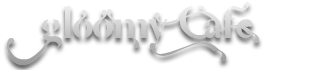
<style>
.page{position:relative;width:333px;height:70px;background:#ffffff}
.page>*{position:absolute;margin:0}
.t1{font:45.8px "CafeLounge19";color:#cccccc}
</style>
<div class="page">
<p class="t1" style="left:7px;top:2px;width:253px;height:63px">Gloomy Cafe</p>
</div>
